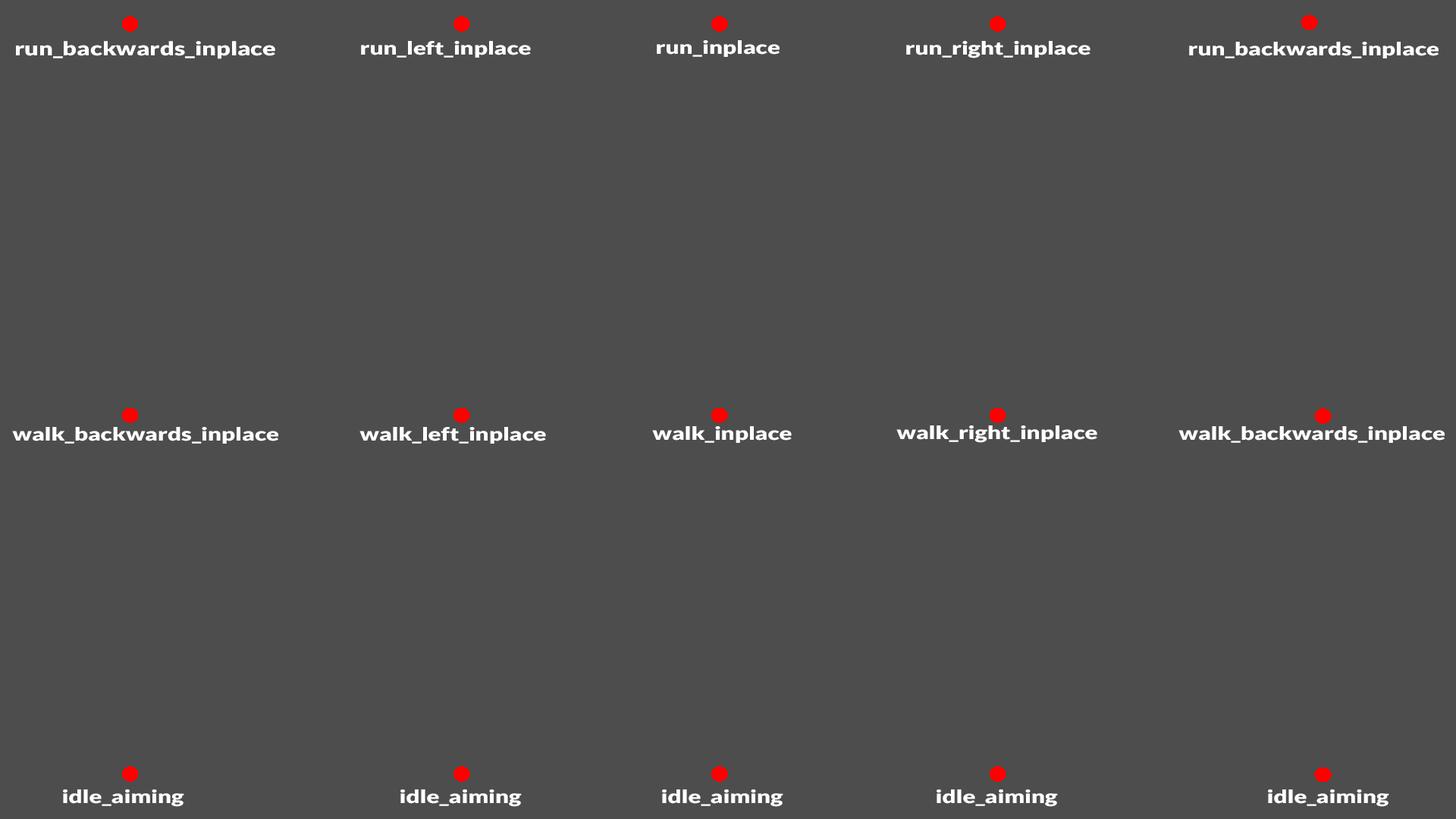
<style>
.page{position:relative;width:1456px;height:819px;background:#4d4d4d}
.page>*{position:absolute;margin:0}
.t1{font:19px "Lato-Black";color:#ffffff;scale:1.3 1}
.t2{font:18.2px "Lato-Black";color:#ffffff;scale:1.3 1}
</style>
<div class="page">
<p class="t1" style="left:16px;top:41px;width:259px;height:18px">run_backwards_inplace</p>
<p class="t2" style="left:361px;top:41px;width:170px;height:17px">run_left_inplace</p>
<p class="t2" style="left:657px;top:40px;width:123px;height:17px">run_inplace</p>
<p class="t2" style="left:906px;top:41px;width:184px;height:17px">run_right_inplace</p>
<p class="t2" style="left:1189px;top:42px;width:250px;height:16px">run_backwards_inplace</p>
<p class="t2" style="left:896px;top:425px;width:201px;height:18px">walk_right_inplace</p>
<p class="t2" style="left:12px;top:427px;width:266px;height:17px">walk_backwards_inplace</p>
<p class="t2" style="left:359px;top:427px;width:187px;height:17px">walk_left_inplace</p>
<p class="t2" style="left:652px;top:426px;width:140px;height:17px">walk_inplace</p>
<p class="t2" style="left:1178px;top:426px;width:267px;height:17px">walk_backwards_inplace</p>
<p class="t2" style="left:63px;top:789px;width:121px;height:18px">idle_aiming</p>
<p class="t2" style="left:400px;top:789px;width:122px;height:18px">idle_aiming</p>
<p class="t2" style="left:662px;top:789px;width:121px;height:18px">idle_aiming</p>
<p class="t2" style="left:937px;top:789px;width:121px;height:18px">idle_aiming</p>
<p class="t2" style="left:1268px;top:789px;width:121px;height:18px">idle_aiming</p>
</div>
